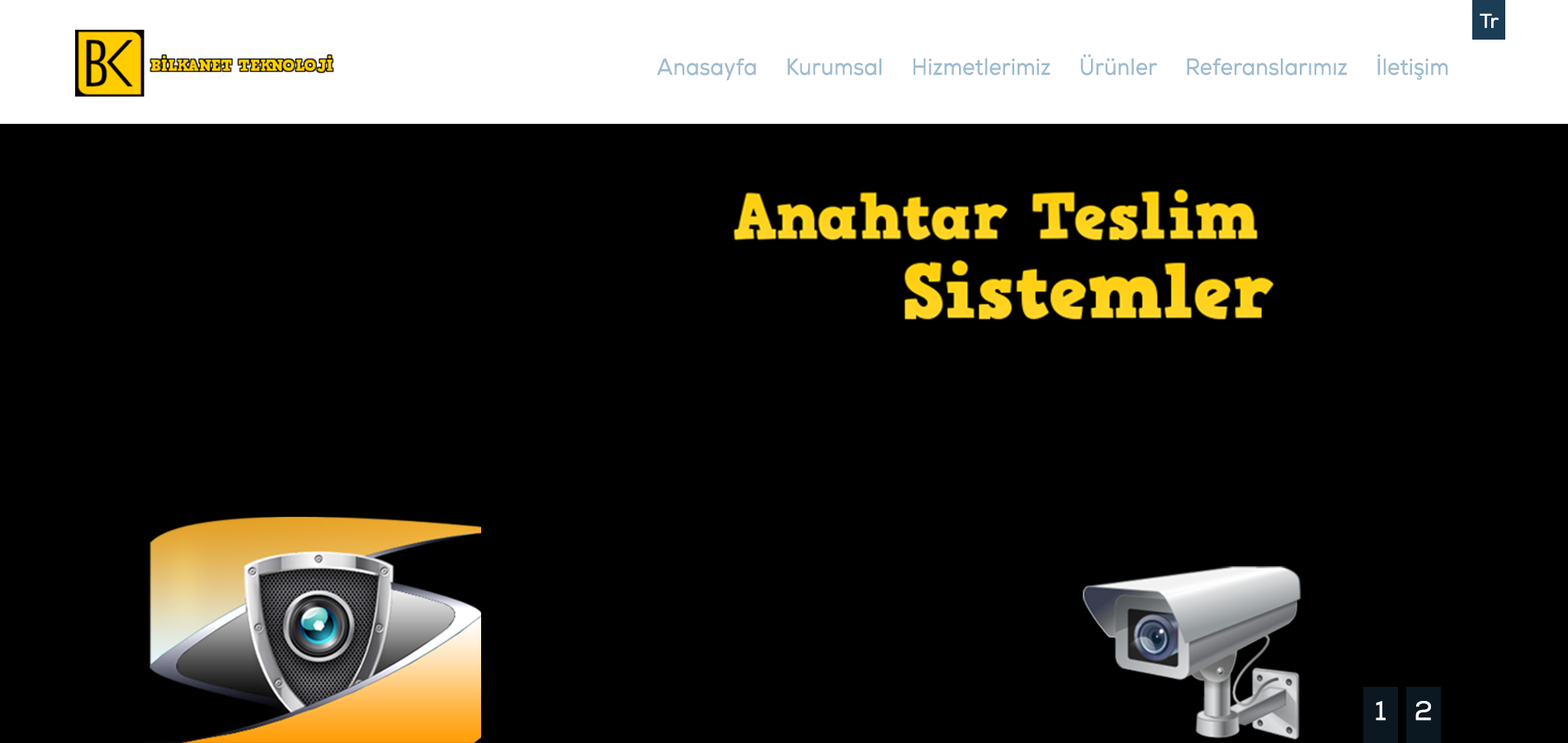
<style>
.page{position:relative;width:1568px;height:743px;background:#000000}
.page>*{position:absolute;margin:0}
.t1{font:19.6px "NexaRegular";letter-spacing:-0.01em;color:#ffffff;font-weight:bold}
.t2{font:23.1px "NexaRegular";letter-spacing:-0.01em;color:#9fbbcf;font-weight:bold;scale:0.9 1}
.t3{font:26.7px "NexaRegular";letter-spacing:-0.01em;color:#ffffff;font-weight:bold}
</style>
<div class="page">
<p class="t1" style="left:1480px;top:13px;width:19px;height:15px">Tr</p>
<p class="t2" style="left:657px;top:54px;width:791px;height:27px">Anasayfa     Kurumsal     Hizmetlerimiz     Ürünler     Referanslarımız     İletişim</p>
<p class="t3" style="left:1376px;top:701px;width:10px;height:19px">1</p>
<p class="t3" style="left:1415px;top:701px;width:16px;height:19px">2</p>
</div>
